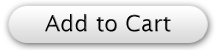
<style>
.page{position:relative;width:220px;height:50px}
.page>*{position:absolute;margin:0}
.t1{font:22.4px "LucidaSans";letter-spacing:0.005em;color:#000000}
</style>
<div class="page">
<p class="t1" style="left:45px;top:14px;width:126px;height:18px">Add to Cart</p>
</div>
